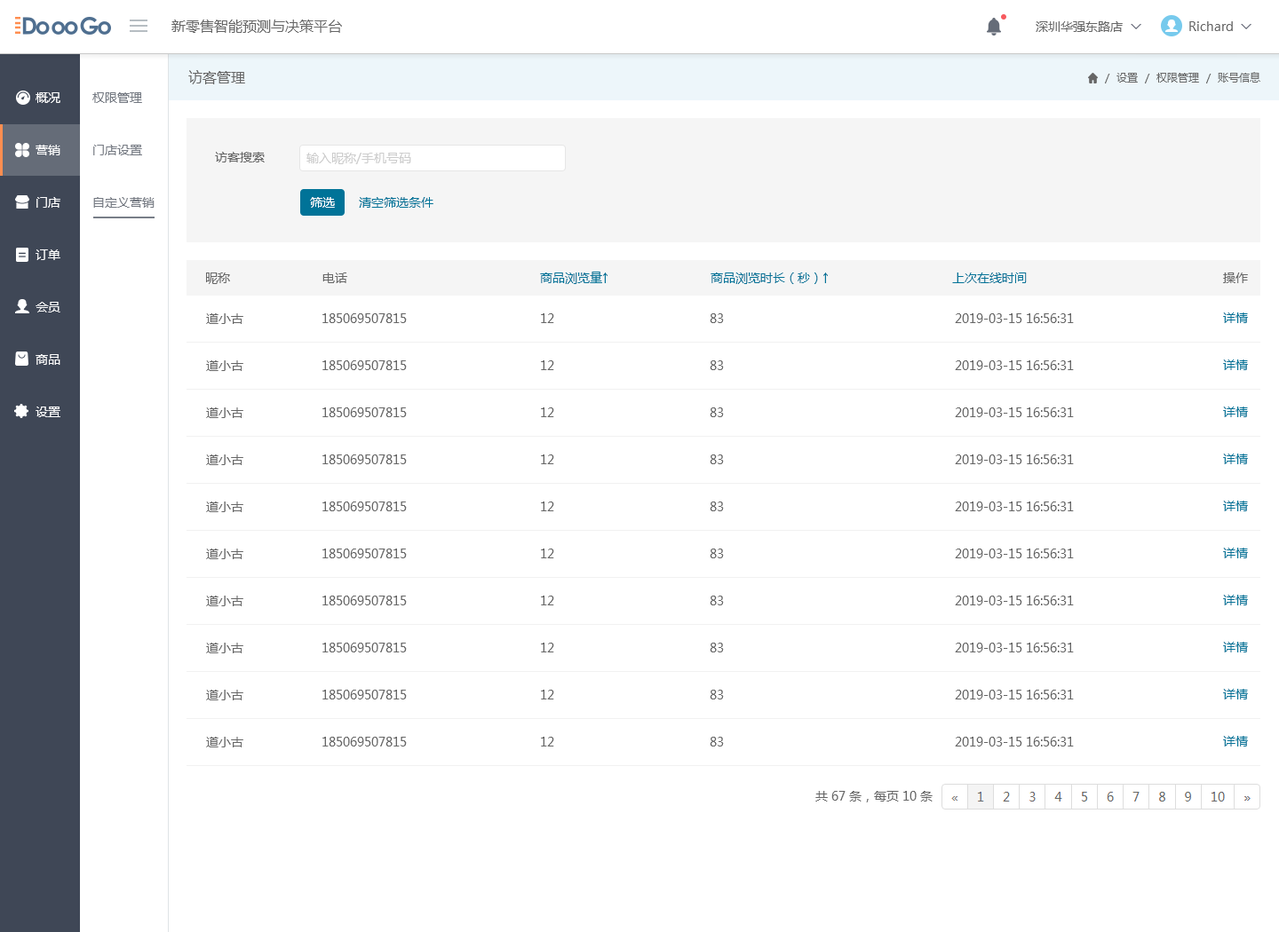
<style>
.page{position:relative;width:1279px;height:932px;background:#ffffff}
.page>*{position:absolute;margin:0}
.t1{font:14.2px "MicrosoftYaHeiUI";color:#666666}
.t2{font:12.4px "MicrosoftYaHeiUI";color:#666666}
.t3{font:12.4px "Marlett";color:#666666}
.t4{font:10.7px "MicrosoftYaHeiUI";color:#666666}
.t5{font:12.4px/52.4px "MicrosoftYaHeiUI";color:#ffffff}
.t6{font:12.4px/52.4px "MicrosoftYaHeiUI";color:#747982}
.t7{font:12.4px "MicrosoftYaHeiUI";color:#cccccc}
.t8{font:12.4px "MicrosoftYaHeiUI";color:#ffffff}
.t9{font:12.4px "MicrosoftYaHeiUI";color:#007398}
</style>
<div class="page">
<p class="t1" style="left:171px;top:20px;width:171px;height:13px">新零售智能预测与决策平台</p>
<p class="t2" style="left:1035px;top:21px;width:88px;height:11px">深圳华强东路店</p>
<p class="t2" style="left:1189px;top:21px;width:58px;height:10px">Richard <span class="t3">6</span></p>
<p class="t1" style="left:188px;top:70px;width:57px;height:14px">访客管理</p>
<p class="t4" style="left:1105px;top:72px;width:155px;height:11px">/  设置  /  权限管理  /  账号信息</p>
<p class="t5" style="left:36px;top:92px;width:24px;height:325px">概况<br>营销<br>门店<br>订单<br>会员<br>商品<br>设置</p>
<p class="t6" style="left:92px;top:92px;width:63px;height:116px">权限管理<br>门店设置<br>自定义营销</p>
<p class="t2" style="left:215px;top:152px;width:50px;height:11px">访客搜索</p>
<p class="t7" style="left:306px;top:153px;width:105px;height:11px">输入昵称/手机号码</p>
<p class="t8" style="left:310px;top:197px;width:25px;height:11px">筛选</p>
<p class="t9" style="left:359px;top:197px;width:74px;height:11px">清空筛选条件</p>
<p class="t2" style="left:206px;top:273px;width:24px;height:11px">昵称</p>
<p class="t2" style="left:322px;top:273px;width:25px;height:10px">电话</p>
<p class="t9" style="left:540px;top:272px;width:67px;height:12px">商品浏览量↑</p>
<p class="t9" style="left:710px;top:273px;width:118px;height:11px">商品浏览时长（秒）↑</p>
<p class="t9" style="left:952px;top:273px;width:75px;height:10px">上次在线时间</p>
<p class="t2" style="left:1223px;top:273px;width:25px;height:10px">操作</p>
<p class="t2" style="left:206px;top:313px;width:37px;height:11px">道小古</p>
<p class="t2" style="left:322px;top:313px;width:85px;height:10px">185069507815</p>
<p class="t2" style="left:541px;top:313px;width:13px;height:10px">12</p>
<p class="t2" style="left:710px;top:313px;width:14px;height:10px">83</p>
<p class="t2" style="left:955px;top:313px;width:119px;height:10px">2019-03-15 16:56:31</p>
<p class="t9" style="left:1223px;top:313px;width:25px;height:10px">详情</p>
<p class="t2" style="left:206px;top:361px;width:37px;height:10px">道小古</p>
<p class="t2" style="left:322px;top:361px;width:85px;height:9px">185069507815</p>
<p class="t2" style="left:541px;top:361px;width:13px;height:9px">12</p>
<p class="t2" style="left:710px;top:361px;width:14px;height:9px">83</p>
<p class="t2" style="left:955px;top:361px;width:119px;height:9px">2019-03-15 16:56:31</p>
<p class="t9" style="left:1223px;top:360px;width:25px;height:10px">详情</p>
<p class="t2" style="left:206px;top:408px;width:37px;height:10px">道小古</p>
<p class="t2" style="left:322px;top:408px;width:85px;height:9px">185069507815</p>
<p class="t2" style="left:541px;top:408px;width:13px;height:9px">12</p>
<p class="t2" style="left:710px;top:408px;width:14px;height:9px">83</p>
<p class="t2" style="left:955px;top:408px;width:119px;height:9px">2019-03-15 16:56:31</p>
<p class="t9" style="left:1223px;top:407px;width:25px;height:10px">详情</p>
<p class="t2" style="left:206px;top:455px;width:37px;height:10px">道小古</p>
<p class="t2" style="left:322px;top:455px;width:85px;height:9px">185069507815</p>
<p class="t2" style="left:541px;top:455px;width:13px;height:9px">12</p>
<p class="t2" style="left:710px;top:455px;width:14px;height:9px">83</p>
<p class="t2" style="left:955px;top:455px;width:119px;height:9px">2019-03-15 16:56:31</p>
<p class="t9" style="left:1223px;top:454px;width:25px;height:10px">详情</p>
<p class="t2" style="left:206px;top:502px;width:37px;height:10px">道小古</p>
<p class="t2" style="left:322px;top:502px;width:85px;height:10px">185069507815</p>
<p class="t2" style="left:541px;top:502px;width:13px;height:10px">12</p>
<p class="t2" style="left:710px;top:502px;width:14px;height:10px">83</p>
<p class="t2" style="left:955px;top:502px;width:119px;height:10px">2019-03-15 16:56:31</p>
<p class="t9" style="left:1223px;top:501px;width:25px;height:11px">详情</p>
<p class="t2" style="left:206px;top:549px;width:37px;height:10px">道小古</p>
<p class="t2" style="left:322px;top:549px;width:85px;height:10px">185069507815</p>
<p class="t2" style="left:541px;top:549px;width:13px;height:10px">12</p>
<p class="t2" style="left:710px;top:549px;width:14px;height:10px">83</p>
<p class="t2" style="left:955px;top:549px;width:119px;height:10px">2019-03-15 16:56:31</p>
<p class="t9" style="left:1223px;top:548px;width:25px;height:11px">详情</p>
<p class="t2" style="left:206px;top:596px;width:37px;height:11px">道小古</p>
<p class="t2" style="left:322px;top:596px;width:85px;height:10px">185069507815</p>
<p class="t2" style="left:541px;top:596px;width:13px;height:10px">12</p>
<p class="t2" style="left:710px;top:596px;width:14px;height:10px">83</p>
<p class="t2" style="left:955px;top:596px;width:119px;height:10px">2019-03-15 16:56:31</p>
<p class="t9" style="left:1223px;top:595px;width:25px;height:11px">详情</p>
<p class="t2" style="left:206px;top:643px;width:37px;height:11px">道小古</p>
<p class="t2" style="left:322px;top:643px;width:85px;height:10px">185069507815</p>
<p class="t2" style="left:541px;top:643px;width:13px;height:10px">12</p>
<p class="t2" style="left:710px;top:643px;width:14px;height:10px">83</p>
<p class="t2" style="left:955px;top:643px;width:119px;height:10px">2019-03-15 16:56:31</p>
<p class="t9" style="left:1223px;top:642px;width:25px;height:11px">详情</p>
<p class="t9" style="left:1223px;top:689px;width:25px;height:11px">详情</p>
<p class="t2" style="left:206px;top:690px;width:37px;height:11px">道小古</p>
<p class="t2" style="left:322px;top:690px;width:85px;height:10px">185069507815</p>
<p class="t2" style="left:541px;top:690px;width:13px;height:10px">12</p>
<p class="t2" style="left:710px;top:690px;width:14px;height:10px">83</p>
<p class="t2" style="left:955px;top:690px;width:119px;height:10px">2019-03-15 16:56:31</p>
<p class="t2" style="left:206px;top:737px;width:37px;height:11px">道小古</p>
<p class="t2" style="left:322px;top:737px;width:85px;height:10px">185069507815</p>
<p class="t2" style="left:541px;top:737px;width:13px;height:10px">12</p>
<p class="t2" style="left:710px;top:737px;width:14px;height:10px">83</p>
<p class="t2" style="left:955px;top:737px;width:119px;height:10px">2019-03-15 16:56:31</p>
<p class="t9" style="left:1223px;top:736px;width:25px;height:11px">详情</p>
<p class="t2" style="left:815px;top:791px;width:117px;height:12px">共 67 条，每页 10 条</p>
</div>
